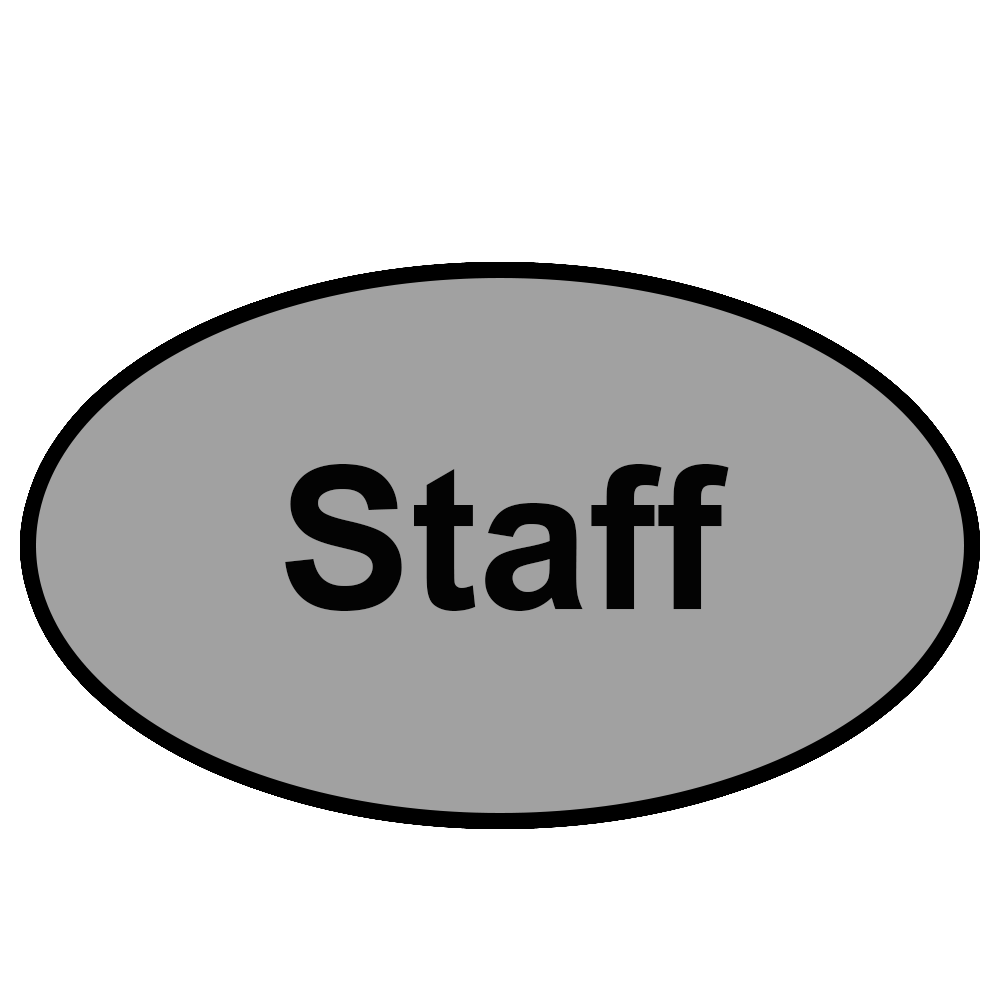
<style>
.page{position:relative;width:1000px;height:1000px;background:#ffffff}
.page>*{position:absolute;margin:0}
.t1{font:200px "Arial-BoldMT";color:#030303}
</style>
<div class="page">
<p class="t1" style="left:285px;top:464px;width:444px;height:147px">Staff</p>
</div>
